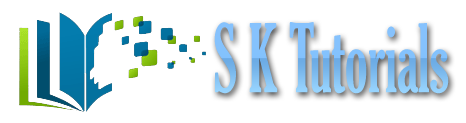
<style>
.page{position:relative;width:466px;height:123px;background:#ffffff}
.page>*{position:absolute;margin:0}
.t1{font:91.3px "GloucesterMT-ExtraCondensed";color:#84c2fb;scale:0.73 1}
</style>
<div class="page">
<p class="t1" style="left:214px;top:22px;width:235px;height:72px">S K Tutorials</p>
</div>
